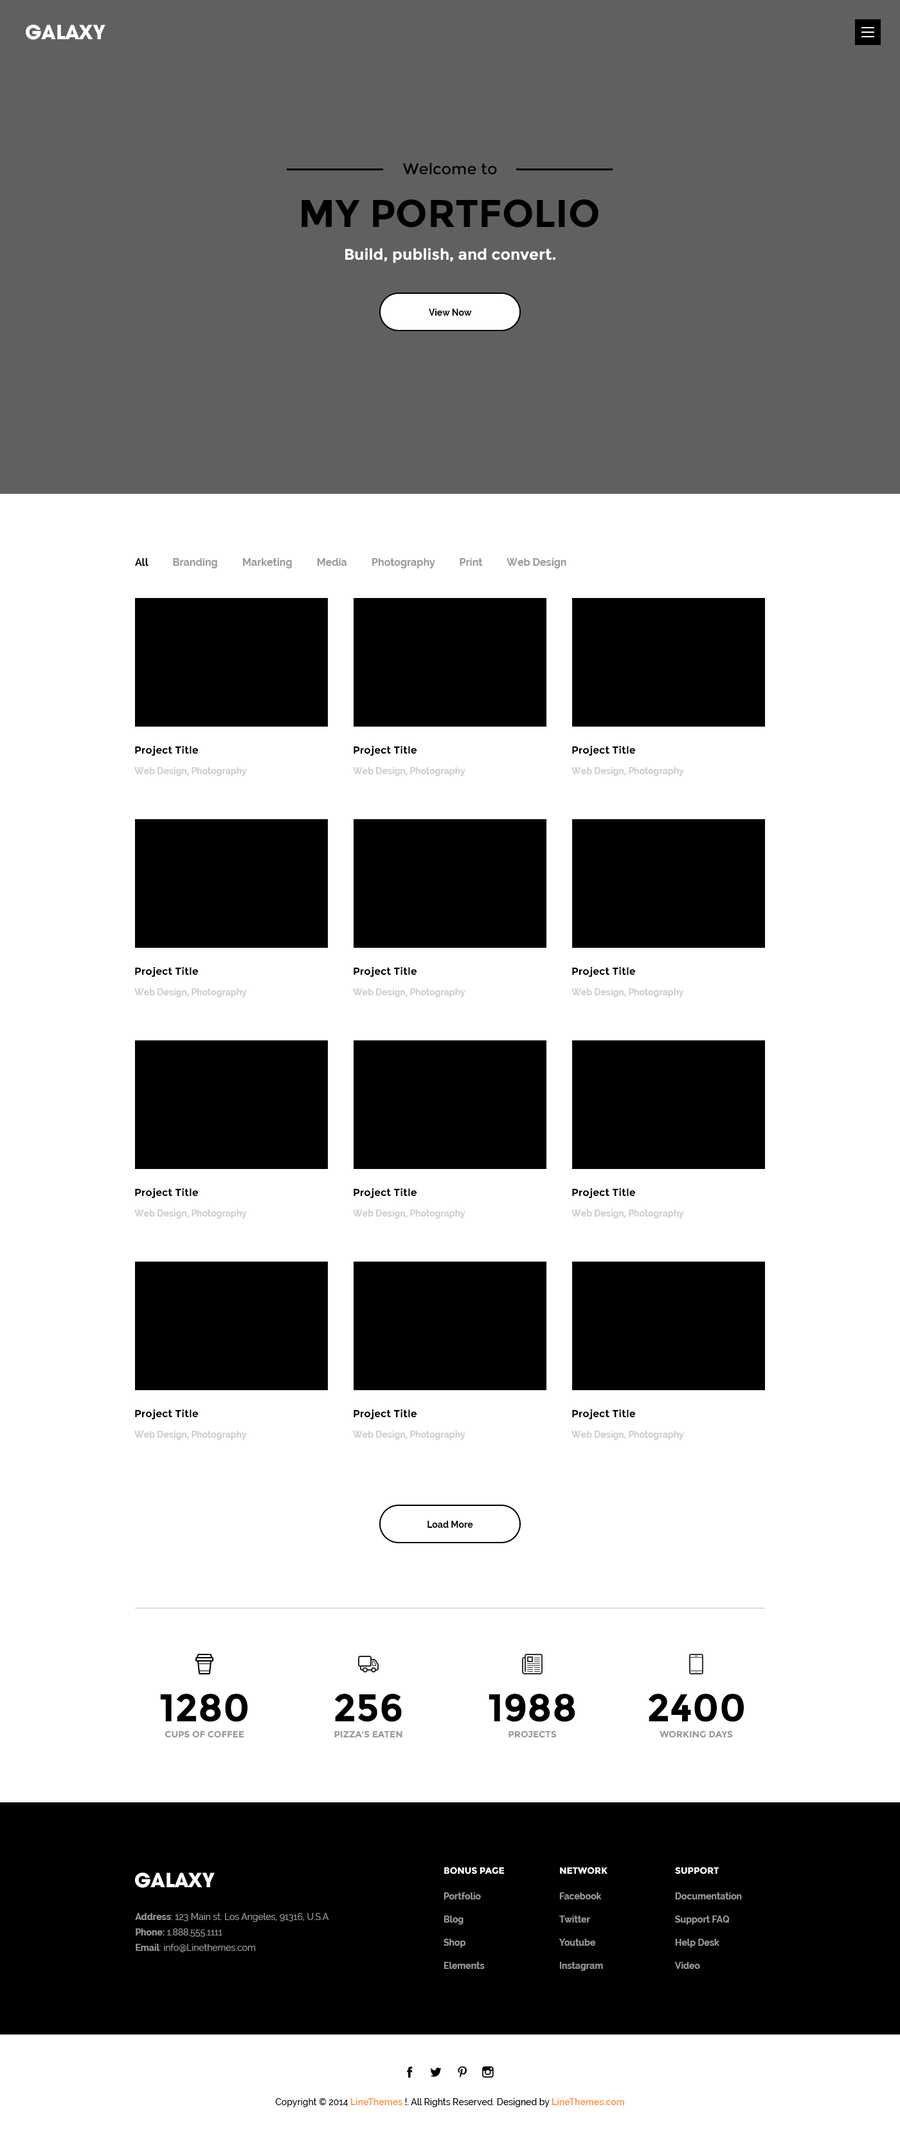
<style>
.page{position:relative;width:900px;height:2138px;background:#ffffff}
.page>*{position:absolute;margin:0}
.t1{font:19.3px "UTMAvoBold";color:#ffffff;text-transform:uppercase}
.t2{font:15.4px "Montserrat-Regular";color:#000000}
.t3{font:38.6px "Montserrat-Bold";color:#000000;text-transform:uppercase}
.t4{font:15.4px "Montserrat-Bold";color:#ffffff}
.t5{font:9px "Raleway-Bold";color:#000000}
.t6{font:10.3px "Raleway-Bold";color:#999999}
.t7{font:10.3px "Raleway-Bold";color:#000000}
.t8{font:10.3px "Montserrat-Bold";color:#000000}
.t9{font:9px "Raleway-Bold";color:#cccccc}
.t10{font:9px "Montserrat-Bold";color:#999999;text-transform:uppercase}
.t11{font:9px "Montserrat-Bold";color:#ffffff;text-transform:uppercase}
.t12{font:9px/11.6px "Raleway-Bold";color:#999999}
.t13{font:9px/15.4px "Raleway";color:#999999}
.t14{font:9px/15.4px "Raleway-Bold";color:#999999}
.t15{font:9px "Raleway-Medium";color:#000000}
.t16{font:9px "Raleway-Bold";color:#ff9e61}
</style>
<div class="page">
<p class="t1" style="left:26px;top:24px;width:79px;height:16px">Galaxy</p>
<p class="t2" style="left:402px;top:163px;width:95px;height:12px">Welcome to</p>
<p class="t3" style="left:302px;top:199px;width:296px;height:29px">my portfolio</p>
<p class="t4" style="left:345px;top:248px;width:210px;height:15px">Build, publish, and convert.</p>
<p class="t5" style="left:429px;top:309px;width:43px;height:7px">View Now</p>
<p class="t6" style="left:135px;top:558px;width:431px;height:10px"><span class="t7">    All          </span>Branding          Marketing          Media          Photography          Print          Web Design</p>
<p class="t8" style="left:135px;top:746px;width:63px;height:10px">Project Title</p>
<p class="t8" style="left:354px;top:746px;width:63px;height:10px">Project Title</p>
<p class="t8" style="left:572px;top:746px;width:63px;height:10px">Project Title</p>
<p class="t9" style="left:134px;top:767px;width:113px;height:9px">Web Design, Photography</p>
<p class="t9" style="left:353px;top:767px;width:112px;height:9px">Web Design, Photography</p>
<p class="t9" style="left:572px;top:767px;width:112px;height:9px">Web Design, Photography</p>
<p class="t8" style="left:135px;top:967px;width:63px;height:10px">Project Title</p>
<p class="t8" style="left:354px;top:967px;width:63px;height:10px">Project Title</p>
<p class="t8" style="left:572px;top:967px;width:63px;height:10px">Project Title</p>
<p class="t9" style="left:134px;top:988px;width:113px;height:9px">Web Design, Photography</p>
<p class="t9" style="left:353px;top:988px;width:112px;height:9px">Web Design, Photography</p>
<p class="t9" style="left:572px;top:988px;width:112px;height:9px">Web Design, Photography</p>
<p class="t8" style="left:135px;top:1188px;width:63px;height:10px">Project Title</p>
<p class="t8" style="left:354px;top:1188px;width:63px;height:10px">Project Title</p>
<p class="t8" style="left:572px;top:1188px;width:63px;height:10px">Project Title</p>
<p class="t9" style="left:134px;top:1209px;width:113px;height:9px">Web Design, Photography</p>
<p class="t9" style="left:353px;top:1209px;width:112px;height:9px">Web Design, Photography</p>
<p class="t9" style="left:572px;top:1209px;width:112px;height:9px">Web Design, Photography</p>
<p class="t8" style="left:135px;top:1409px;width:63px;height:10px">Project Title</p>
<p class="t8" style="left:354px;top:1409px;width:63px;height:10px">Project Title</p>
<p class="t8" style="left:572px;top:1409px;width:63px;height:10px">Project Title</p>
<p class="t9" style="left:134px;top:1430px;width:113px;height:9px">Web Design, Photography</p>
<p class="t9" style="left:353px;top:1430px;width:112px;height:9px">Web Design, Photography</p>
<p class="t9" style="left:572px;top:1430px;width:112px;height:9px">Web Design, Photography</p>
<p class="t5" style="left:428px;top:1520px;width:45px;height:7px">Load More</p>
<p class="t3" style="left:160px;top:1693px;width:88px;height:29px">1280</p>
<p class="t3" style="left:334px;top:1693px;width:68px;height:29px">256</p>
<p class="t3" style="left:489px;top:1693px;width:86px;height:29px">1988</p>
<p class="t3" style="left:648px;top:1693px;width:96px;height:29px">2400</p>
<p class="t10" style="left:165px;top:1730px;width:79px;height:8px">Cups of coffee</p>
<p class="t10" style="left:334px;top:1730px;width:68px;height:8px">Pizza's eaten</p>
<p class="t10" style="left:509px;top:1730px;width:48px;height:8px">Projects</p>
<p class="t10" style="left:660px;top:1730px;width:73px;height:8px">WORKING DAYS</p>
<p class="t1" style="left:135px;top:1872px;width:80px;height:15px">Galaxy</p>
<p class="t11" style="left:444px;top:1866px;width:61px;height:8px">Bonus Page</p>
<p class="t11" style="left:560px;top:1866px;width:48px;height:8px">Network</p>
<p class="t11" style="left:675px;top:1866px;width:44px;height:8px">Support</p>
<p class="t12" style="left:444px;top:1892px;width:41px;height:76px">Portfolio<br><br>Blog<br><br>Shop<br><br>Elements</p>
<p class="t12" style="left:559px;top:1892px;width:44px;height:78px">Facebook<br><br>Twitter<br><br>Youtube<br><br>Instagram</p>
<p class="t12" style="left:675px;top:1892px;width:67px;height:76px">Documentation<br><br>Support FAQ<br><br>Help Desk<br><br>Video</p>
<p class="t13" style="left:135px;top:1913px;width:194px;height:39px"><span class="t14">Address</span>: 123 Main st. Los Angeles, 91316, U.S.A<br><span class="t14">Phone:</span> 1.888.555.1111<br><span class="t14">Email</span>: info@Linethemes.com</p>
<p class="t15" style="left:275px;top:2098px;width:350px;height:9px">Copyright © 2014 <span class="t16">LineThemes </span>!. All Rights Reserved. Designed by <span class="t16">LineThemes.com</span></p>
</div>
